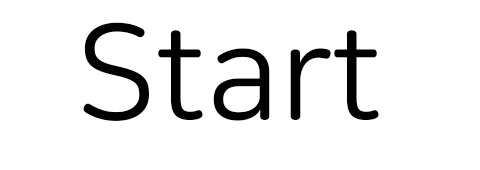
<style>
.page{position:relative;width:480px;height:170px;background:#ffffff}
.page>*{position:absolute;margin:0}
.t1{font:134.2px "NanumSquareRoundR";letter-spacing:-0.01em;color:#000000}
</style>
<div class="page">
<p class="t1" style="left:83px;top:22px;width:296px;height:99px">Start</p>
</div>
